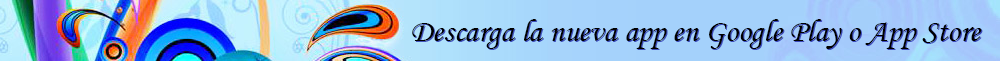
<style>
.page{position:relative;width:1000px;height:61px}
.page>*{position:absolute;margin:0}
.t1{font:32px "MonotypeCorsiva";color:#000000}
</style>
<div class="page">
<p class="t1" style="left:412px;top:19px;width:570px;height:30px">Descarga la nueva app en Google Play o App Store</p>
</div>
